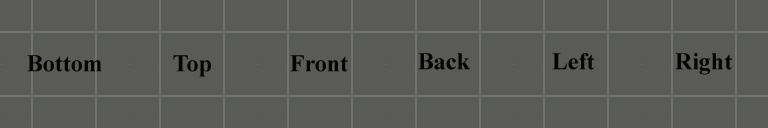
<style>
.page{position:relative;width:768px;height:128px;background:#5a5a58}
.page>*{position:absolute;margin:0}
.t1{font:24px "TimesNewRomanPS-BoldMT";color:#040404}
</style>
<div class="page">
<p class="t1" style="left:418px;top:53px;width:52px;height:17px">Back</p>
<p class="t1" style="left:552px;top:53px;width:43px;height:17px">Left</p>
<p class="t1" style="left:675px;top:53px;width:57px;height:22px">Right</p>
<p class="t1" style="left:27px;top:55px;width:75px;height:17px">Bottom</p>
<p class="t1" style="left:173px;top:55px;width:38px;height:22px">Top</p>
<p class="t1" style="left:290px;top:55px;width:58px;height:17px">Front</p>
</div>
